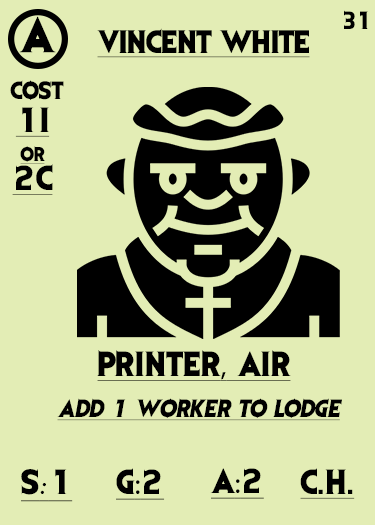
<style>
.page{position:relative;width:375px;height:525px;background:#e3edb5}
.page>*{position:absolute;margin:0}
.t1{font:41.7px "EvilDead";letter-spacing:-0.05em;color:#000000}
.t2{font:20.8px "EvilDead";letter-spacing:-0.1em;color:#000000}
.t3{font:27.1px "EvilDead";letter-spacing:-0.025em;color:#000000;text-decoration:underline}
.t4{font:20.8px "EvilDead";color:#000000}
.t5{font:29.2px/29.2px "EvilDead";color:#000000;text-decoration:underline}
.t6{font:16.7px/29.2px "EvilDead";color:#000000;text-decoration:underline}
.t7{font:29.2px "EvilDead";color:#000000;text-decoration:underline}
.t8{font:29.2px "MyriadPro-Regular";color:#000000;text-decoration:underline}
.t9{font:20.8px "EvilDead";color:#000000;font-style:italic;text-decoration:underline}
.t10{font:29.2px "Fadli-Script";color:#000000;text-decoration:underline}
</style>
<div class="page">
<p class="t1" style="left:19px;top:16px;width:37px;height:37px">A</p>
<p class="t2" style="left:344px;top:10px;width:24px;height:19px">31</p>
<p class="t3" style="left:97px;top:28px;width:213px;height:30px">VINCENT WHITE</p>
<p class="t4" style="left:10px;top:80px;width:54px;height:20px">COST</p>
<p class="t5" style="left:12px;top:107px;width:41px;height:88px;text-align:center">1I<br><span class="t6">or<br></span>2C</p>
<p class="t7" style="left:97px;top:350px;width:194px;height:31px">PRINTER<span class="t8">,</span> AIR</p>
<p class="t9" style="left:57px;top:398px;width:285px;height:23px">Add 1 worker to lodge</p>
<p class="t7" style="left:21px;top:469px;width:52px;height:33px">S<span class="t10">:</span>1</p>
<p class="t7" style="left:116px;top:468px;width:49px;height:32px">G<span class="t8">:</span>2</p>
<p class="t7" style="left:210px;top:468px;width:54px;height:31px">A<span class="t8">:</span>2</p>
<p class="t7" style="left:300px;top:468px;width:55px;height:31px">C.H.</p>
</div>
